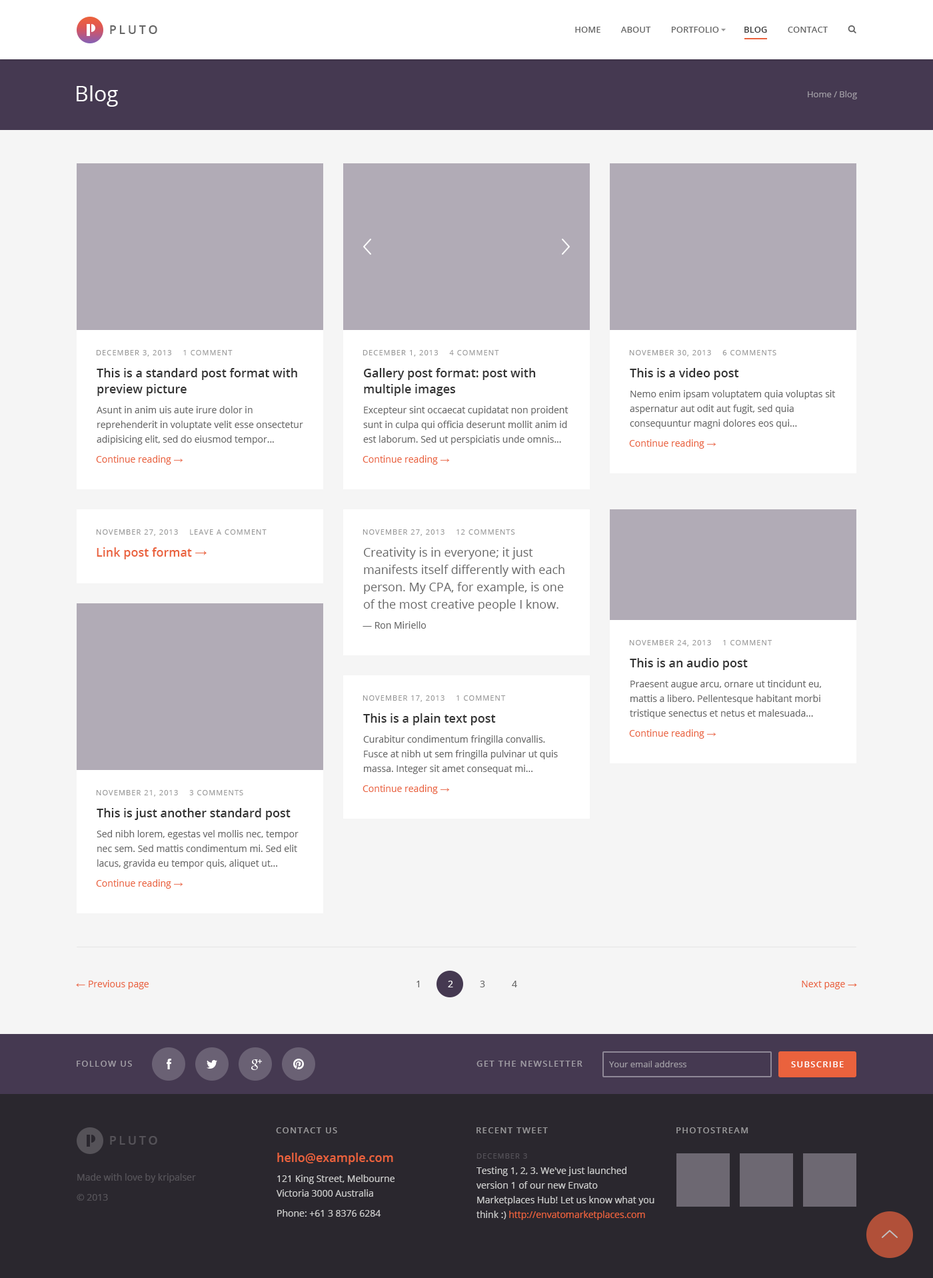
<style>
.page{position:relative;width:933px;height:1278px;background:#f5f5f5}
.page>*{position:absolute;margin:0}
.t1{font:12px "OpenSans-Semibold";letter-spacing:0.2em;color:#666666;text-transform:uppercase}
.t2{font:8.7px "OpenSans-Semibold";color:#666666;text-transform:uppercase}
.t3{font:8.7px "OpenSans-Semibold";color:#333333;text-transform:uppercase}
.t4{font:21.3px "OpenSans";color:#ffffff}
.t5{font:8.7px "OpenSans";color:#a09ca4}
.t6{font:7.3px "OpenSans";letter-spacing:0.1em;color:#999999;text-transform:uppercase}
.t7{font:12px/16px "OpenSans-Semibold";color:#333333}
.t8{font:12px "OpenSans-Semibold";color:#333333}
.t9{font:9.3px/14.7px "OpenSans";color:#666666}
.t10{font:9.3px "OpenSans";color:#ea623d}
.t11{font:9.3px "ArialMT";color:#ea623d}
.t12{font:12px "OpenSans-Semibold";color:#ea623d}
.t13{font:12px "ArialMT";color:#ea623d}
.t14{font:12px/17.3px "OpenSans";color:#666666}
.t15{font:9.3px "OpenSans";color:#666666}
.t16{font:9.3px "OpenSans";color:#ffffff}
.t17{font:8.7px "OpenSans-Semibold";letter-spacing:0.1em;color:#a09ca4;text-transform:uppercase}
.t18{font:8.7px "OpenSans-Semibold";letter-spacing:0.1em;color:#ffffff;text-transform:uppercase}
.t19{font:8.7px "OpenSans-Semibold";letter-spacing:0.1em;color:#979698;text-transform:uppercase}
.t20{font:12px "OpenSans-Semibold";letter-spacing:0.2em;color:#555258;text-transform:uppercase}
.t21{font:9.3px/20px "OpenSans";color:#cccccc}
.t22{font:12px/16px "OpenSans-Semibold";color:#ea623d}
.t23{font:9.3px/14.7px "OpenSans";color:#cccccc}
.t24{font:7.3px "OpenSans";letter-spacing:0.1em;color:#545158;text-transform:uppercase}
.t25{font:9.3px/15.3px "OpenSans";color:#cccccc}
.t26{font:9.3px/14.7px "OpenSans";color:#ea623d}
.t27{font:9.3px/20px "OpenSans";color:#555258}
</style>
<div class="page">
<p class="t1" style="left:110px;top:25px;width:47px;height:9px">Pluto</p>
<p class="t2" style="left:575px;top:27px;width:253px;height:6px">Home         About         Portfolio           <span class="t3">Blog         </span>Contact</p>
<p class="t4" style="left:77px;top:85px;width:41px;height:22px">Blog</p>
<p class="t5" style="left:808px;top:91px;width:49px;height:8px">Home / Blog</p>
<p class="t6" style="left:96px;top:350px;width:137px;height:7px">December 3, 2013    1 comment</p>
<p class="t6" style="left:363px;top:350px;width:136px;height:7px">December 1, 2013    4 comment</p>
<p class="t6" style="left:629px;top:350px;width:148px;height:7px">November 30, 2013    6 comments</p>
<p class="t7" style="left:97px;top:368px;width:200px;height:28px">This is a standard post format with preview picture</p>
<p class="t7" style="left:364px;top:368px;width:172px;height:28px">Gallery post format: post with<br>multiple images</p>
<p class="t8" style="left:630px;top:368px;width:109px;height:12px">This is a video post</p>
<p class="t9" style="left:630px;top:390px;width:205px;height:39px">Nemo enim ipsam voluptatem quia voluptas sit aspernatur aut odit aut fugit, sed quia consequuntur magni dolores eos qui...</p>
<p class="t9" style="left:97px;top:406px;width:206px;height:39px">Asunt in anim uis aute irure dolor in reprehenderit in voluptate velit esse onsectetur adipisicing elit, sed do eiusmod tempor...</p>
<p class="t9" style="left:363px;top:406px;width:206px;height:39px">Excepteur sint occaecat cupidatat non proident sunt in culpa qui officia deserunt mollit anim id est laborum. Sed ut perspiciatis unde omnis...</p>
<p class="t10" style="left:629px;top:439px;width:88px;height:10px">Continue reading <span class="t11">→</span></p>
<p class="t10" style="left:96px;top:455px;width:87px;height:10px">Continue reading <span class="t11">→</span></p>
<p class="t10" style="left:363px;top:455px;width:87px;height:10px">Continue reading <span class="t11">→</span></p>
<p class="t6" style="left:96px;top:529px;width:171px;height:7px">November 27, 2013    Leave a comment</p>
<p class="t6" style="left:363px;top:529px;width:152px;height:7px">November 27, 2013    12 comments</p>
<p class="t12" style="left:97px;top:547px;width:110px;height:12px">Link post format <span class="t13">→</span></p>
<p class="t14" style="left:363px;top:547px;width:202px;height:64px">Creativity is in everyone; it just manifests itself differently with each person. My CPA, for example, is one of the most creative people I know.</p>
<p class="t15" style="left:363px;top:621px;width:63px;height:8px">— Ron Miriello</p>
<p class="t6" style="left:629px;top:640px;width:144px;height:7px">November 24, 2013    1 comment</p>
<p class="t8" style="left:630px;top:658px;width:118px;height:12px">This is an audio post</p>
<p class="t9" style="left:630px;top:680px;width:192px;height:39px">Praesent augue arcu, ornare ut tincidunt eu, mattis a libero. Pellentesque habitant morbi tristique senectus et netus et malesuada...</p>
<p class="t6" style="left:363px;top:695px;width:143px;height:7px">November 17, 2013    1 comment</p>
<p class="t8" style="left:363px;top:713px;width:133px;height:12px">This is a plain text post</p>
<p class="t9" style="left:363px;top:735px;width:195px;height:39px">Curabitur condimentum fringilla convallis. Fusce at nibh ut sem fringilla pulvinar ut quis massa. Integer sit amet consequat mi...</p>
<p class="t10" style="left:629px;top:729px;width:88px;height:10px">Continue reading <span class="t11">→</span></p>
<p class="t10" style="left:363px;top:785px;width:87px;height:9px">Continue reading <span class="t11">→</span></p>
<p class="t6" style="left:96px;top:790px;width:147px;height:7px">November 21, 2013    3 comments</p>
<p class="t8" style="left:97px;top:808px;width:194px;height:12px">This is just another standard post</p>
<p class="t9" style="left:97px;top:830px;width:202px;height:39px">Sed nibh lorem, egestas vel mollis nec, tempor nec sem. Sed mattis condimentum mi. Sed elit lacus, gravida eu tempor quis, aliquet ut...</p>
<p class="t10" style="left:96px;top:879px;width:87px;height:10px">Continue reading <span class="t11">→</span></p>
<p class="t10" style="left:76px;top:980px;width:73px;height:9px"><span class="t11">← </span>Previous page</p>
<p class="t15" style="left:417px;top:981px;width:2px;height:6px">1</p>
<p class="t16" style="left:448px;top:981px;width:5px;height:6px">2</p>
<p class="t15" style="left:480px;top:981px;width:5px;height:6px">3</p>
<p class="t15" style="left:512px;top:981px;width:5px;height:6px">4</p>
<p class="t10" style="left:802px;top:981px;width:55px;height:8px">Next page <span class="t11">→</span></p>
<p class="t17" style="left:77px;top:1061px;width:55px;height:6px">Follow us</p>
<p class="t17" style="left:477px;top:1061px;width:106px;height:6px">Get the newsletter</p>
<p class="t5" style="left:609px;top:1061px;width:78px;height:6px">Your email address</p>
<p class="t18" style="left:791px;top:1061px;width:53px;height:6px">Subscribe</p>
<p class="t19" style="left:276px;top:1127px;width:61px;height:6px">Contact us</p>
<p class="t19" style="left:477px;top:1127px;width:71px;height:6px">Recent tweet</p>
<p class="t19" style="left:677px;top:1127px;width:72px;height:6px">Photostream</p>
<p class="t20" style="left:110px;top:1136px;width:47px;height:8px">Pluto</p>
<p class="t21" style="left:277px;top:1152px;width:118px;height:64px"><span class="t22">hello@example.com<br></span>121 King Street, Melbourne <br><span class="t23">Victoria 3000 Australia<br></span>Phone: +61 3 8376 6284</p>
<p class="t24" style="left:477px;top:1153px;width:50px;height:5px">December 3</p>
<p class="t23" style="left:477px;top:1166px;width:178px;height:54px"><span class="t25">Testing 1, 2, 3. We've just launched </span>version 1 of our new Envato Marketplaces Hub! Let us know what you think :) <span class="t26">http://envatomarketplaces.com</span></p>
<p class="t27" style="left:77px;top:1173px;width:119px;height:27px">Made with love by kripalser<br>© 2013</p>
</div>
